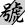
<style>
.page{position:relative;width:25px;height:25px;background:#d1d1d1}
.page>*{position:absolute;margin:0}
.t1{font:25px "DFXingKai-W5-WINP-BF";letter-spacing:0.02em;color:#000000;scale:1.08 1}
</style>
<div class="page">
<p class="t1" style="left:1px;top:1px;width:23px;height:22px">號</p>
</div>
